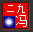
<style>
.page{position:relative;width:33px;height:32px;background:#f20000}
.page>*{position:absolute;margin:0}
.t1{font:10.4px "SimSun";color:#ffffff}
.t2{font:11.7px "SimSun";color:#ffffff}
</style>
<div class="page">
<p class="t1" style="left:7px;top:4px;width:18px;height:9px">二九</p>
<p class="t2" style="left:16px;top:15px;width:11px;height:12px">冯</p>
</div>
